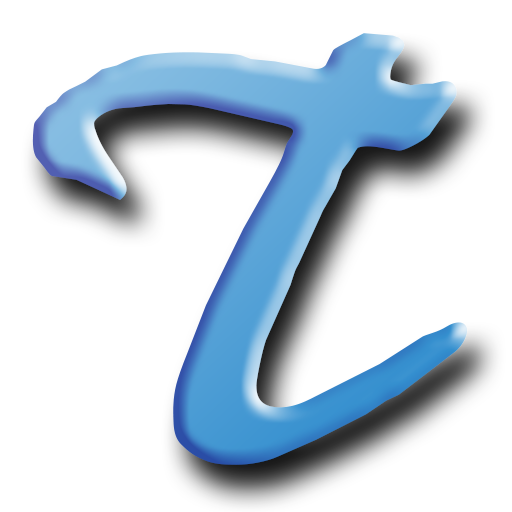
<style>
.page{position:relative;width:512px;height:512px;background:#ffffff}
.page>*{position:absolute;margin:0}
.t1{font:801.1px "HYi5gf";font-weight:bold}
</style>
<div class="page">
<p class="t1" style="left:32px;top:33px;width:436px;height:432px">T</p>
</div>
